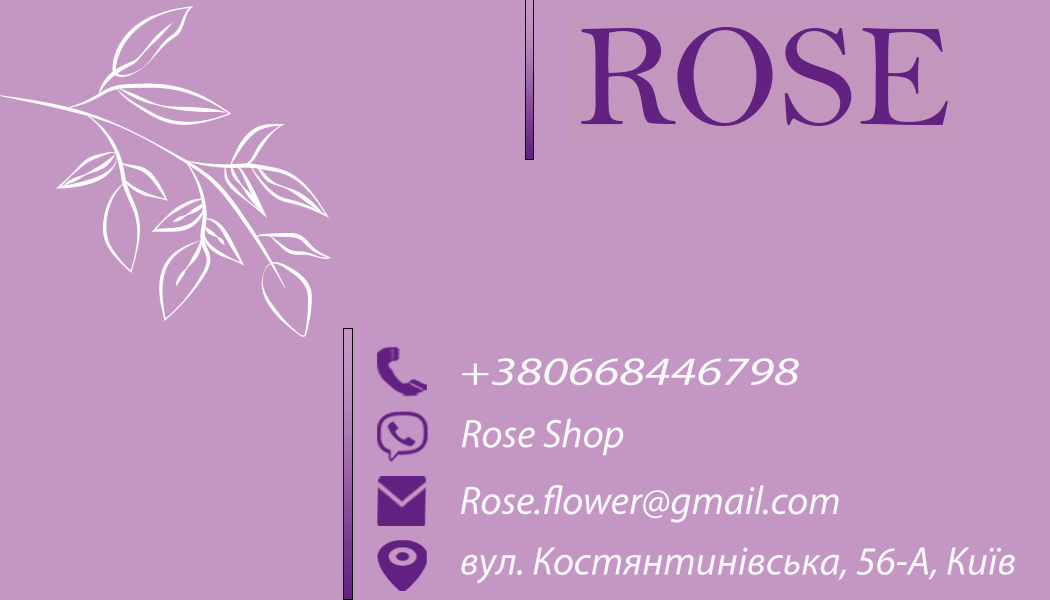
<style>
.page{position:relative;width:1050px;height:600px;background:#c496c4}
.page>*{position:absolute;margin:0}
.t1{font:40px "MyriadPro-It";color:#f8f7f9;scale:1.31 1}
.t2{font:40px "MyriadPro-It";color:#f8f7f9}
</style>
<div class="page">
<p class="t1" style="left:462px;top:358px;width:337px;height:28px">+380668446798</p>
<p class="t2" style="left:461px;top:418px;width:163px;height:38px">Rose Shop</p>
<p class="t2" style="left:460px;top:485px;width:379px;height:38px">Rose.flower@gmail.com</p>
<p class="t2" style="left:461px;top:547px;width:554px;height:37px">вул. Костянтинівська, 56-А, Київ</p>
</div>
